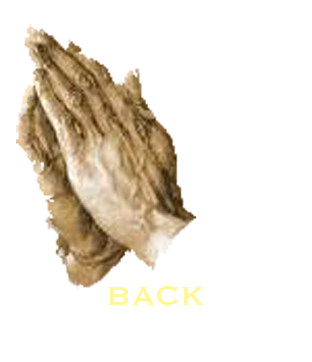
<style>
.page{position:relative;width:312px;height:362px;background:#ffffff}
.page>*{position:absolute;margin:0}
.t1{font:35.4px "Copperplate";color:#fff799}
</style>
<div class="page">
<p class="t1" style="left:109px;top:286px;width:94px;height:19px">BACK</p>
</div>
